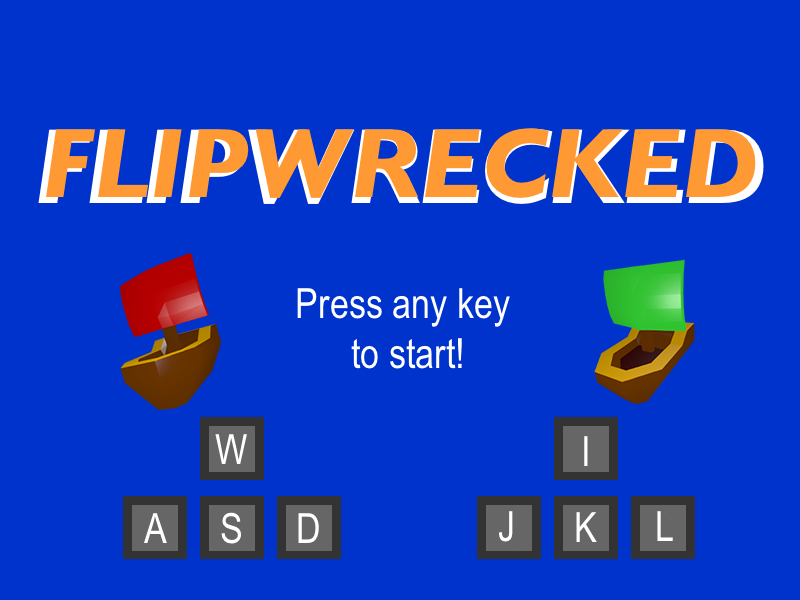
<style>
.page{position:relative;width:800px;height:600px;background:#0033cc}
.page>*{position:absolute;margin:0}
.t1{font:108.3px "GillSans-BoldItalic";letter-spacing:-0.04em;color:#ff9933}
.t2{font:100px "GillSans-BoldItalic";color:#ff9933}
.t3{font:41.7px "ArialNarrow";color:#ffffff}
</style>
<div class="page">
<p class="t1" style="left:38px;top:128px;width:726px;height:76px">FLIPWRECKED</p>
<p class="t2" style="left:46px;top:128px;width:710px;height:70px">FLIPWRECKED</p>
<p class="t3" style="left:297px;top:288px;width:213px;height:81px;text-align:center">Press any key<br> to start!</p>
</div>
